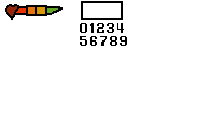
<style>
.page{position:relative;width:200px;height:125px;background:#ffffff}
.page>*{position:absolute;margin:0}
.t1{font:15.4px "PixelDigivolve";letter-spacing:0.01em;color:#000000;scale:0.8 1}
</style>
<div class="page">
<p class="t1" style="left:80px;top:23px;width:7px;height:10px">0</p>
<p class="t1" style="left:90px;top:23px;width:4px;height:10px">1</p>
<p class="t1" style="left:97px;top:23px;width:7px;height:10px">2</p>
<p class="t1" style="left:107px;top:23px;width:7px;height:10px">3</p>
<p class="t1" style="left:117px;top:23px;width:7px;height:10px">4</p>
<p class="t1" style="left:80px;top:36px;width:7px;height:10px">5</p>
<p class="t1" style="left:90px;top:36px;width:7px;height:10px">6</p>
<p class="t1" style="left:100px;top:36px;width:7px;height:10px">7</p>
<p class="t1" style="left:110px;top:36px;width:7px;height:10px">8</p>
</div>
